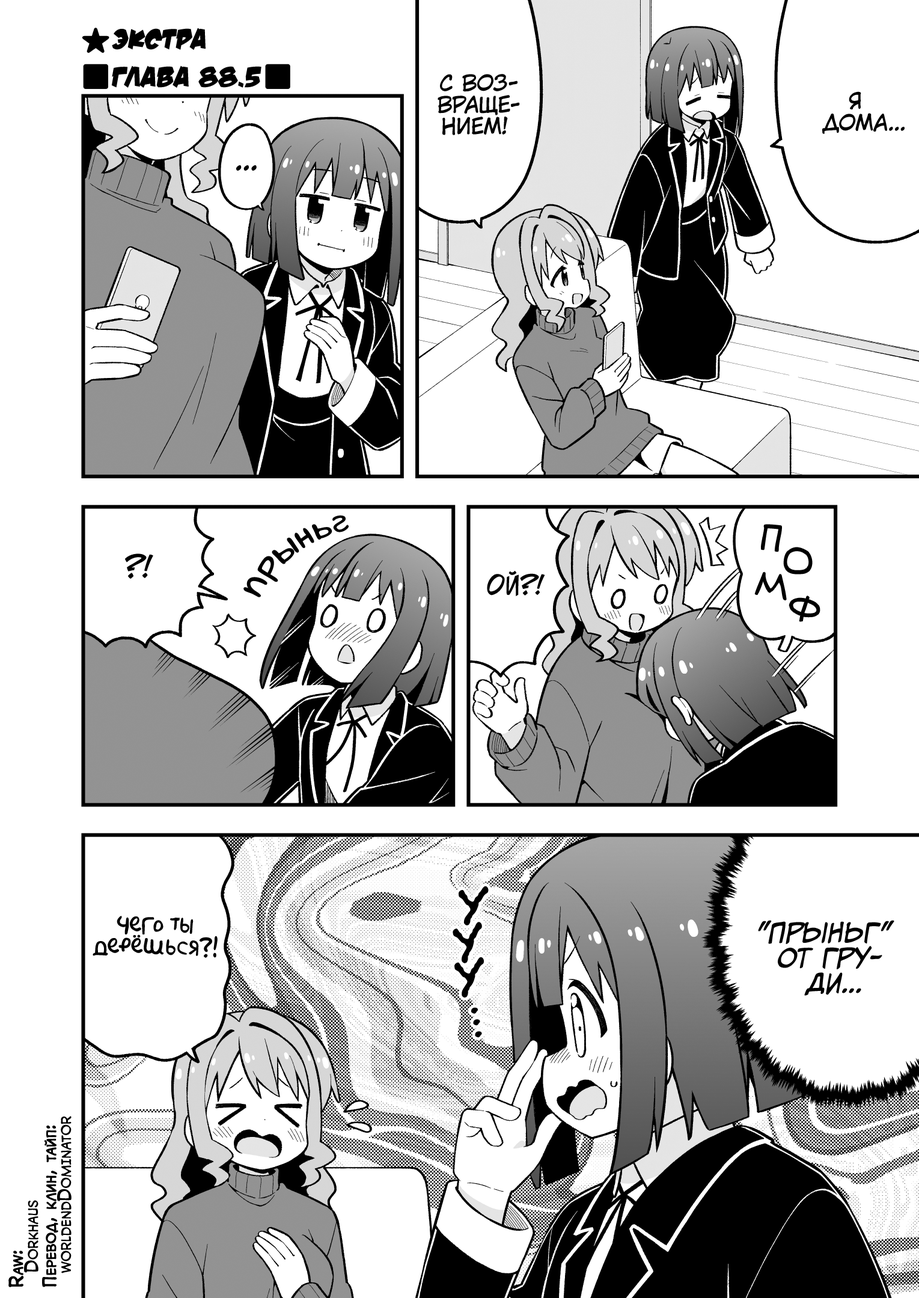
<style>
.page{position:relative;width:919px;height:1298px;background:#ffffff}
.page>*{position:absolute;margin:0}
.t1{font:28.8px "v_DamnNoisyKids";color:#000000;text-transform:uppercase}
.t2{font:21.6px "KuraiVoice2";color:#000000;text-transform:uppercase}
.t3{font:28.8px "KuraiVoice2";color:#000000;text-transform:uppercase}
.t4{font:36.1px "laCartoonerie";color:#000000}
.t5{font:34.9px "laCartoonerie";color:#000000}
.t6{font:33.6px "laCartoonerie";color:#000000}
.t7{font:32.4px "laCartoonerie";color:#000000}
.t8{font:31.2px "laCartoonerie";color:#000000}
.t9{font:30px "laCartoonerie";color:#000000}
.t10{font:33.6px "v_Augie";color:#000000;text-transform:uppercase}
.t11{font:28.8px "v_CCJeffCampbell";color:#000000;text-transform:uppercase}
.t12{font:25.2px "v_CCJeffCampbell";color:#000000;text-transform:uppercase}
.t13{font:54.1px "el_CCEvilSchemes";color:#000000;scale:0.9 1}
.t14{font:21.6px "AkbarPlain";color:#000000}
.t15{font:25.2px "CCMeanwhile";color:#000000;text-transform:uppercase;font-style:italic}
.t16{font:39.7px "el_CCEvilSchemes";color:#000000}
.t17{font:18px "v_CCMonologous";color:#000000;font-variant:small-caps;font-weight:bold}
.t18{font:18px/15px "v_CCMonologous";color:#000000;font-variant:small-caps}
</style>
<div class="page">
<p class="t1" style="left:112px;top:28px;width:94px;height:22px">Экстра</p>
<p class="t1" style="left:111px;top:65px;width:150px;height:23px">Глава 88.5</p>
<p class="t2" style="left:437px;top:74px;width:83px;height:61px;text-align:center">С воз-<br>враще-<br>нием!</p>
<p class="t2" style="left:822px;top:91px;width:82px;height:43px;text-align:center">Я<br>дома...</p>
<p class="t3" style="left:236px;top:165px;width:21px;height:6px">...</p>
<p class="t4" style="left:243px;top:515px;width:106px;height:82px;rotate:-37deg">п<span class="t5">р</span><span class="t6">ы</span><span class="t7">н</span><span class="t8">ь</span><span class="t9">г</span></p>
<p class="t10" style="left:761px;top:525px;width:20px;height:27px;rotate:8deg">п</p>
<p class="t11" style="left:125px;top:553px;width:28px;height:26px">?!</p>
<p class="t10" style="left:784px;top:547px;width:28px;height:27px">о</p>
<p class="t12" style="left:487px;top:570px;width:58px;height:26px">Ой?!</p>
<p class="t10" style="left:755px;top:572px;width:31px;height:28px;rotate:5deg">м</p>
<p class="t10" style="left:789px;top:596px;width:31px;height:25px;rotate:15deg">ф</p>
<p class="t13" style="left:458px;top:886px;width:31px;height:39px;rotate:1deg">у</p>
<p class="t14" style="left:93px;top:916px;width:125px;height:42px;text-align:center">Чего ты<br>дерёшься?!</p>
<p class="t13" style="left:452px;top:922px;width:30px;height:41px;rotate:-6deg">у</p>
<p class="t15" style="left:758px;top:920px;width:136px;height:76px;text-align:center">"Прыньг"<br>от гру-<br>ди...</p>
<p class="t13" style="left:454px;top:957px;width:30px;height:40px;rotate:-3deg">у</p>
<p class="t16" style="left:471px;top:1007px;width:7px;height:7px">.</p>
<p class="t16" style="left:473px;top:1019px;width:7px;height:7px">.</p>
<p class="t16" style="left:475px;top:1031px;width:7px;height:7px">.</p>
<p class="t17" style="left:8px;top:1116px;width:64px;height:171px;rotate:-90deg">Raw:<br><span class="t18">  Dorkhaus<br></span>Перевод, клин, тайп:<br><span class="t18">  worldendDominator</span></p>
</div>
